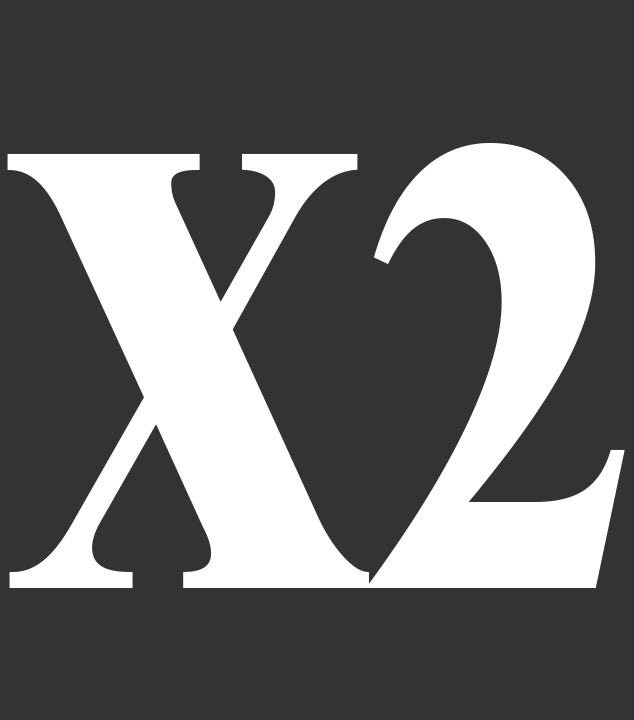
<style>
.page{position:relative;width:634px;height:720px;background:#333333}
.page>*{position:absolute;margin:0}
.t1{font:639.2px "Dutch801BT-ExtraBold";color:#ffffff;scale:0.82 1}
</style>
<div class="page">
<p class="t1" style="left:7px;top:142px;width:618px;height:446px">X2</p>
</div>
